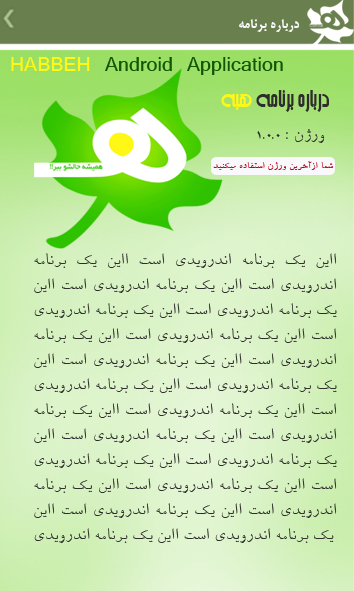
<style>
.page{position:relative;width:354px;height:591px}
.page>*{position:absolute;margin:0}
.t1{font:14.6px "BMitraBold";color:#f9f8fa}
.t2{font:31.2px "Kartika";color:#115505}
.t3{font:31.2px "Kartika";color:#fff715}
.t4{font:31.2px "BArshia";color:#2d2d2b}
.t5{font:31.2px "BArshia";color:#fff715}
.t6{font:20.8px "BFerdosi";color:#2d2d2b}
.t7{font:12.5px "BFerdosi";color:#b8081d}
</style>
<div class="page">
<p class="t1" style="left:239px;top:19px;width:60px;height:13px">درباره برنامه</p>
<p class="t2" style="left:11px;top:57px;width:272px;height:18px"><span class="t3">HABBEH </span>Android Application</p>
<p class="t4" style="left:221px;top:90px;width:108px;height:22px">درباره برنامه <span class="t5">هبه</span></p>
<p class="t6" style="left:257px;top:129px;width:68px;height:14px">ورژن : 1.0.0</p>
<p class="t7" style="left:213px;top:161px;width:120px;height:9px">شما ازآخرين ورژن استفاده ميکنيد</p>
<p class="t6" style="left:34px;top:253px;width:303px;height:290px;text-align:justify">ااين يک برنامه اندرويدي است ااين يک برنامه اندرويدي است ااين يک برنامه اندرويدي است ااين يک برنامه اندرويدي است ااين يک برنامه اندرويدي است ااين يک برنامه اندرويدي است ااين يک برنامه اندرويدي است ااين يک برنامه اندرويدي است ااين يک برنامه اندرويدي است ااين يک برنامه اندرويدي است ااين يک برنامه اندرويدي است ااين يک برنامه اندرويدي است ااين يک برنامه اندرويدي است ااين يک برنامه اندرويدي است ااين يک برنامه اندرويدي است ااين يک برنامه اندرويدي است ااين يک برنامه اندرويدي است ااين يک برنامه اندرويدي است ااين يک برنامه اندرويدي است ااين يک برنامه اندرويدي است ااين يک برنامه اندرويدي است</p>
</div>
